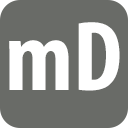
<style>
.page{position:relative;width:128px;height:128px;background:#696b67}
.page>*{position:absolute;margin:0}
.t1{font:100px "MyriadPro-BoldCond";color:#ffffff}
</style>
<div class="page">
<p class="t1" style="left:9px;top:22px;width:111px;height:69px">mD</p>
</div>
